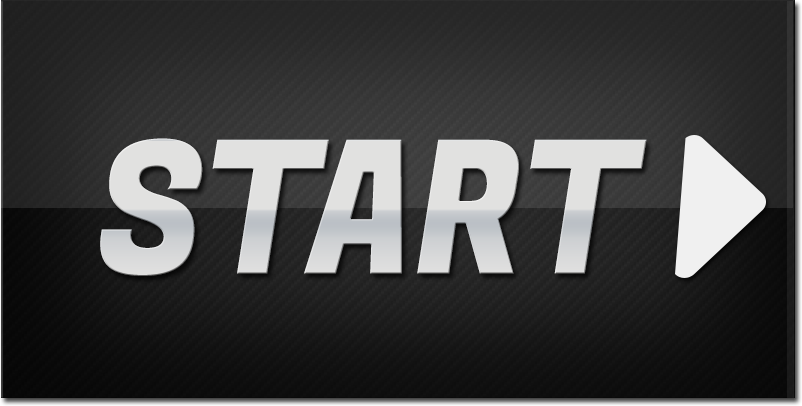
<style>
.page{position:relative;width:802px;height:406px}
.page>*{position:absolute;margin:0}
.t1{font:185.2px "FugazOne-Regular";color:#dfdfdf;scale:0.89 1}
</style>
<div class="page">
<p class="t1" style="left:100px;top:138px;width:547px;height:138px">START</p>
</div>
